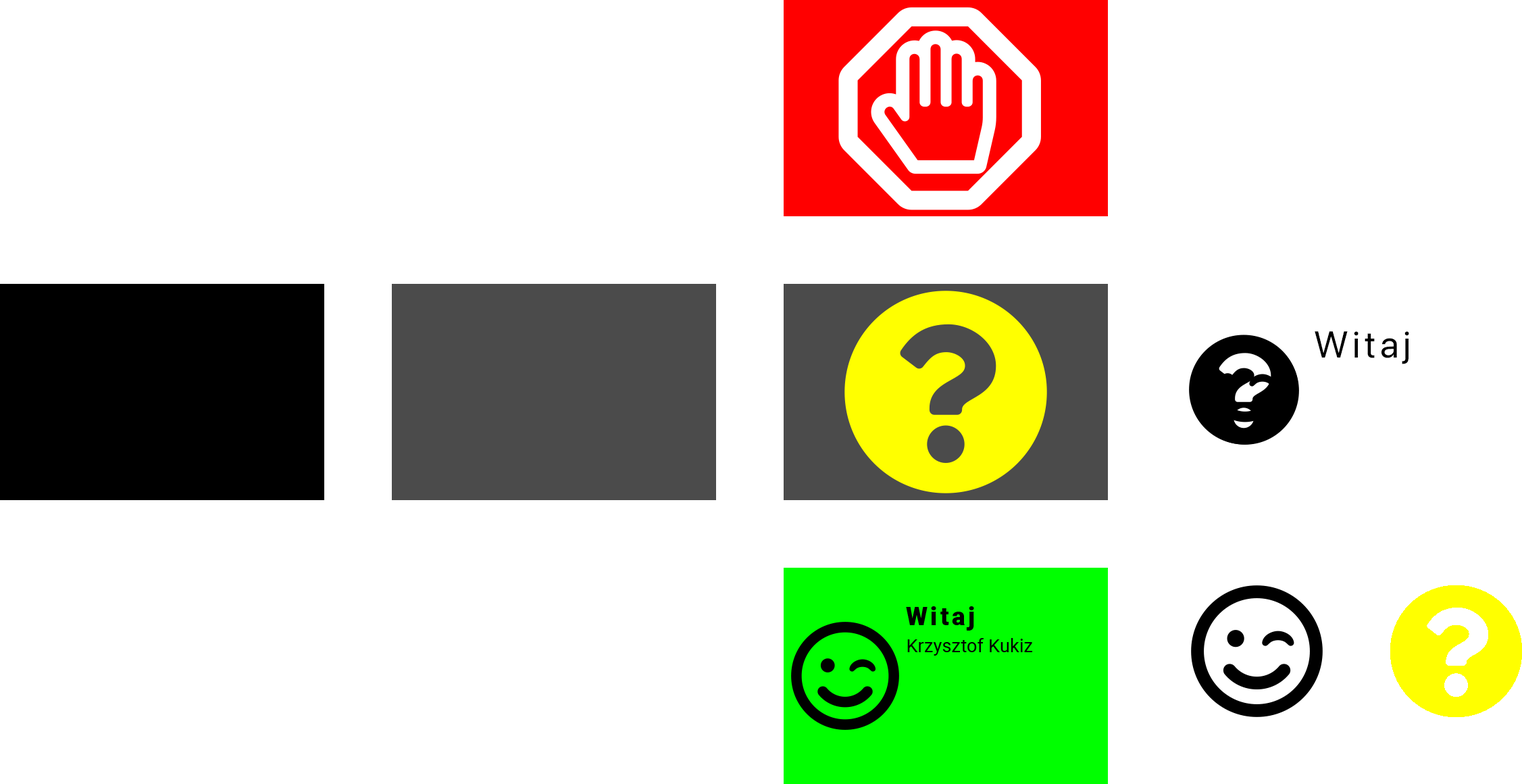
<style>
.page{position:relative;width:1522px;height:784px;background:#ffffff}
.page>*{position:absolute;margin:0}
.t1{font:37.1px "SFPro-Regular";letter-spacing:0.12em;color:#000000}
.t2{font:24.7px "Roboto-Black";letter-spacing:0.12em;color:#000000}
.t3{font:18.6px "Roboto-Regular";color:#000000}
</style>
<div class="page">
<p class="t1" style="left:1314px;top:331px;width:95px;height:33px">Witaj</p>
<p class="t2" style="left:906px;top:606px;width:68px;height:24px">Witaj</p>
<p class="t3" style="left:907px;top:638px;width:125px;height:17px">Krzysztof Kukiz</p>
</div>
